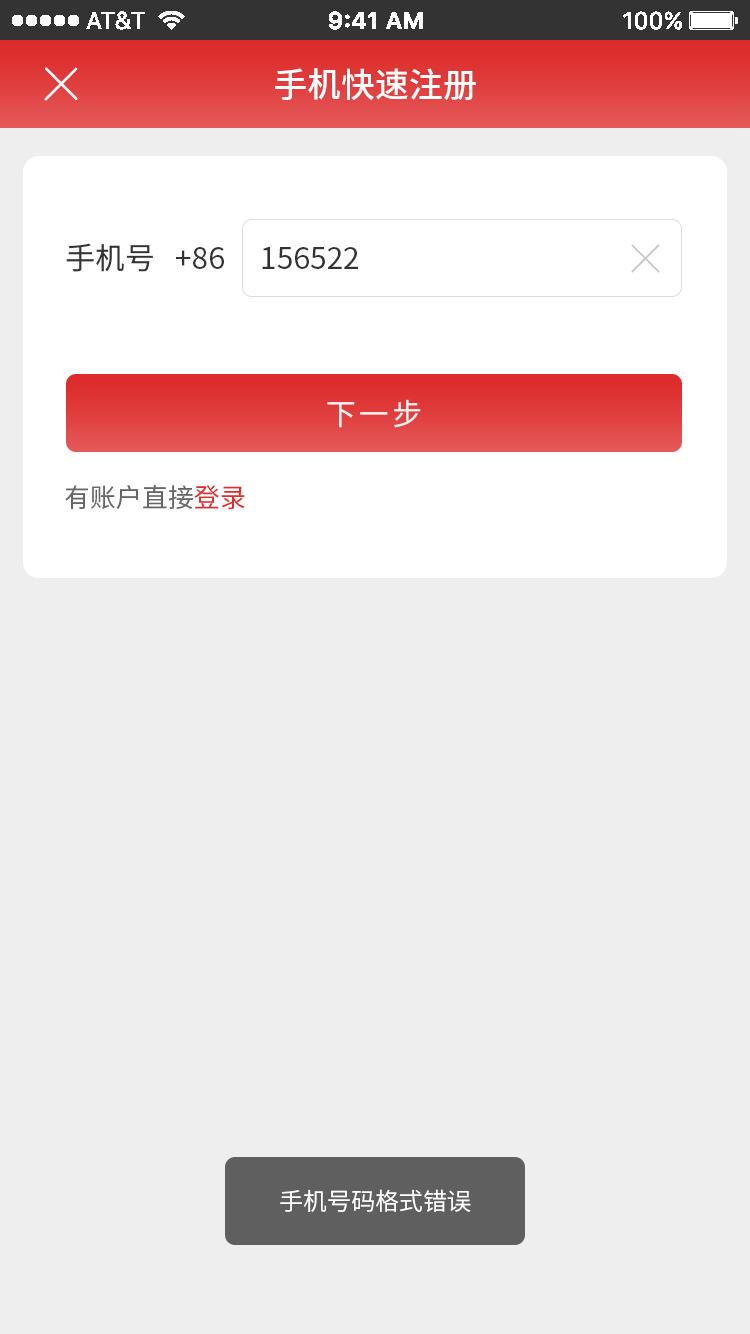
<style>
.page{position:relative;width:750px;height:1334px;background:#eeeeee}
.page>*{position:absolute;margin:0}
.t1{font:34px "SourceHanSansCN-Medium";color:#ffffff}
.t2{font:30px "SourceHanSansCN-Regular";color:#333333}
.t3{font:30px "SourceHanSansCN-Regular";letter-spacing:0.1em;color:#f2f2f2}
.t4{font:26px "SourceHanSansCN-Regular";color:#666666}
.t5{font:26px "SourceHanSansCN-Regular";color:#dd2f2f}
.t6{font:24px "SourceHanSansCN-Normal";color:#ffffff}
</style>
<div class="page">
<p class="t1" style="left:275px;top:68px;width:201px;height:33px">手机快速注册</p>
<p class="t2" style="left:66px;top:243px;width:87px;height:29px">手机号</p>
<p class="t2" style="left:176px;top:247px;width:48px;height:22px">+86</p>
<p class="t2" style="left:262px;top:247px;width:96px;height:22px">156522</p>
<p class="t3" style="left:327px;top:399px;width:94px;height:29px">下一步</p>
<p class="t4" style="left:65px;top:485px;width:180px;height:25px">有账户直接<span class="t5">登录</span></p>
<p class="t6" style="left:280px;top:1189px;width:191px;height:23px">手机号码格式错误</p>
</div>
